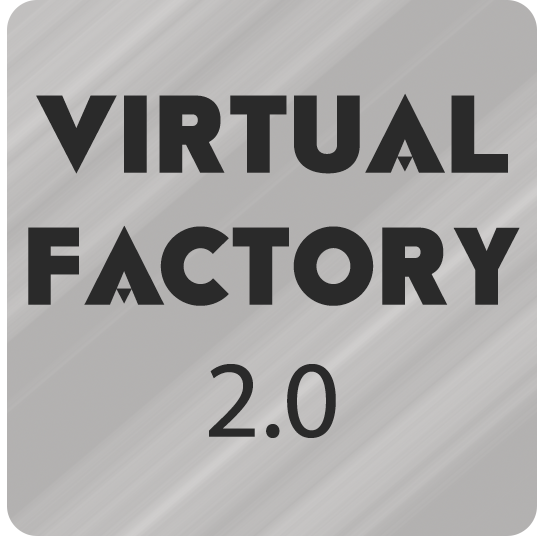
<style>
.page{position:relative;width:540px;height:540px}
.page>*{position:absolute;margin:0}
.t1{font:110px "RAINFALL-Black";color:#2a2a2a}
.t2{font:110px "MyriadPro-Regular";color:#2a2a2a}
</style>
<div class="page">
<p class="t1" style="left:28px;top:93px;width:492px;height:345px;text-align:center">Virtual<br>Factory<br><span class="t2">2.0</span></p>
</div>
